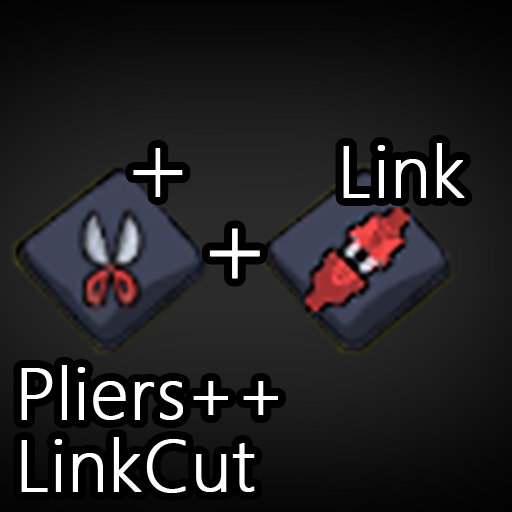
<style>
.page{position:relative;width:512px;height:512px}
.page>*{position:absolute;margin:0}
.t1{font:102.4px "MicrosoftYaHeiLight";color:#ffffff}
.t2{font:68.3px "MicrosoftYaHeiLight";color:#ffffff;font-weight:bold}
.t3{font:102.4px "MicrosoftYaHeiLight";color:#ffffff;font-weight:bold}
.t4{font:68.3px/71.7px "MicrosoftYaHeiLight";color:#ffffff;font-weight:bold}
</style>
<div class="page">
<p class="t1" style="left:133px;top:148px;width:50px;height:49px">+</p>
<p class="t2" style="left:343px;top:143px;width:122px;height:55px">Link</p>
<p class="t3" style="left:209px;top:228px;width:51px;height:51px">+</p>
<p class="t4" style="left:21px;top:365px;width:257px;height:128px">Pliers++<br>LinkCut</p>
</div>
